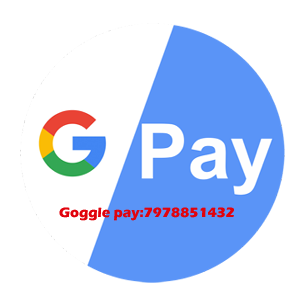
<style>
.page{position:relative;width:300px;height:300px;background:#ffffff}
.page>*{position:absolute;margin:0}
.t1{font:14px "ErasITC-Bold";color:#e1030d}
</style>
<div class="page">
<p class="t1" style="left:59px;top:207px;width:175px;height:14px">Goggle pay:7978851432</p>
</div>
